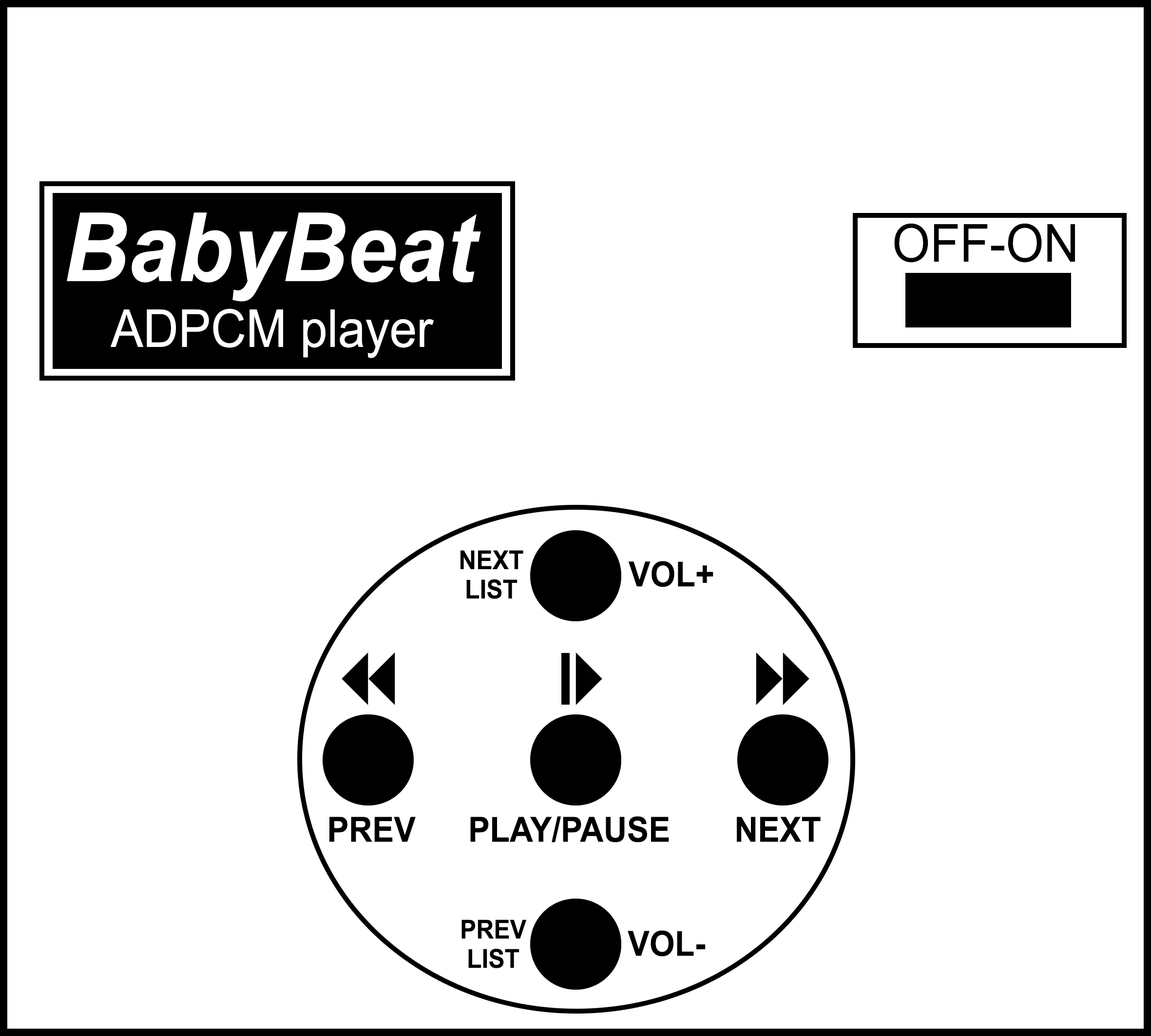
<style>
.page{position:relative;width:1151px;height:1036px;background:#ffffff}
.page>*{position:absolute;margin:0}
.t1{font:95.6px "Arial-BoldItalicMT";color:#ffffff;scale:0.93 1}
.t2{font:52.1px "ArialMT";color:#000000;scale:0.93 1}
.t3{font:52.1px "ArialMT";color:#ffffff;scale:0.93 1}
.t4{font:26.1px "Arial-BoldMT";color:#000000;scale:0.93 1}
.t5{font:34.8px "Arial-BoldMT";color:#000000;scale:0.93 1}
</style>
<div class="page">
<p class="t1" style="left:67px;top:212px;width:414px;height:90px">BabyBeat</p>
<p class="t2" style="left:894px;top:223px;width:181px;height:40px">OFF-ON</p>
<p class="t3" style="left:111px;top:308px;width:323px;height:50px">ADPCM player</p>
<p class="t4" style="left:460px;top:550px;width:63px;height:49px;text-align:center">NEXT<br>LIST</p>
<p class="t5" style="left:628px;top:561px;width:85px;height:26px">VOL+</p>
<p class="t5" style="left:329px;top:817px;width:87px;height:25px">PREV</p>
<p class="t5" style="left:470px;top:816px;width:199px;height:27px">PLAY/PAUSE</p>
<p class="t5" style="left:737px;top:817px;width:84px;height:25px">NEXT</p>
<p class="t4" style="left:461px;top:920px;width:66px;height:48px;text-align:center">PREV<br>LIST</p>
<p class="t5" style="left:628px;top:930px;width:78px;height:27px">VOL-</p>
</div>
